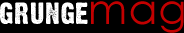
<style>
.page{position:relative;width:184px;height:33px;background:#000000}
.page>*{position:absolute;margin:0}
.t1{font:30px "DirtyHeadline";letter-spacing:0.025em;color:#ffffff}
.t2{font:42px "CenturyGothic";letter-spacing:0.025em;color:#c20000}
</style>
<div class="page">
<p class="t1" style="left:0px;top:2px;width:88px;height:22px">grunge</p>
<p class="t2" style="left:91px;top:1px;width:93px;height:32px">mag</p>
</div>
